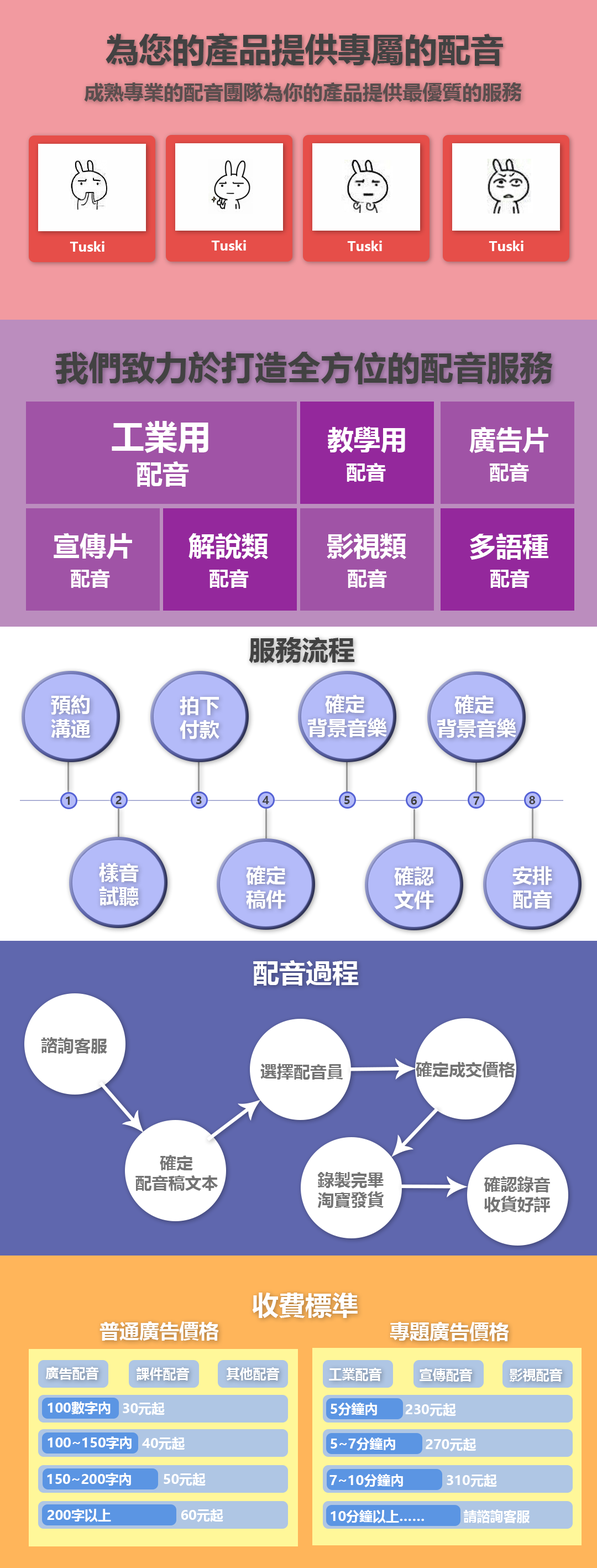
<style>
.page{position:relative;width:597px;height:1568px}
.page>*{position:absolute;margin:0}
.t1{font:33.2px "MicrosoftYaHei-Bold";color:#424242}
.t2{font:19.9px "MicrosoftYaHei-Bold";color:#424242}
.t3{font:13.3px "MicrosoftYaHei-Bold";color:#ffffff}
.t4{font:33.2px "MicrosoftYaHei-Bold";color:#ffffff}
.t5{font:26.5px "MicrosoftYaHei-Bold";color:#ffffff}
.t6{font:19.9px "MicrosoftYaHei-Bold";color:#ffffff}
.t7{font:26.5px "MicrosoftYaHei-Bold";color:#424242}
.t8{font:11.1px "MicrosoftYaHei-Bold";color:#424242}
.t9{font:16.6px "MicrosoftYaHei-Bold";color:#747474}
</style>
<div class="page">
<p class="t1" style="left:106px;top:33px;width:397px;height:33px">為您的產品提供專屬的配音</p>
<p class="t2" style="left:84px;top:82px;width:438px;height:20px">成熟專業的配音團隊為你的產品提供最優質的服務</p>
<p class="t3" style="left:70px;top:241px;width:35px;height:11px">Tuski</p>
<p class="t3" style="left:211px;top:240px;width:35px;height:11px">Tuski</p>
<p class="t3" style="left:347px;top:241px;width:35px;height:10px">Tuski</p>
<p class="t3" style="left:489px;top:241px;width:35px;height:10px">Tuski</p>
<p class="t1" style="left:55px;top:351px;width:498px;height:33px">我們致力於打造全方位的配音服務</p>
<p class="t4" style="left:112px;top:421px;width:97px;height:32px">工業用</p>
<p class="t5" style="left:328px;top:426px;width:77px;height:27px">教學用</p>
<p class="t5" style="left:470px;top:427px;width:79px;height:26px">廣告片</p>
<p class="t5" style="left:137px;top:461px;width:52px;height:26px">配音</p>
<p class="t6" style="left:346px;top:463px;width:40px;height:19px">配音</p>
<p class="t6" style="left:489px;top:463px;width:40px;height:19px">配音</p>
<p class="t5" style="left:54px;top:533px;width:78px;height:26px">宣傳片</p>
<p class="t5" style="left:189px;top:533px;width:79px;height:26px">解說類</p>
<p class="t5" style="left:327px;top:533px;width:80px;height:26px">影視類</p>
<p class="t5" style="left:470px;top:533px;width:79px;height:27px">多語種</p>
<p class="t6" style="left:70px;top:569px;width:40px;height:19px">配音</p>
<p class="t6" style="left:209px;top:569px;width:40px;height:19px">配音</p>
<p class="t6" style="left:347px;top:569px;width:40px;height:19px">配音</p>
<p class="t6" style="left:490px;top:569px;width:40px;height:19px">配音</p>
<p class="t7" style="left:249px;top:637px;width:106px;height:26px">服務流程</p>
<p class="t6" style="left:51px;top:695px;width:40px;height:43px">預約<br>溝通</p>
<p class="t6" style="left:180px;top:696px;width:40px;height:43px">拍下<br>付款</p>
<p class="t6" style="left:308px;top:694px;width:79px;height:43px">確定<br>背景音樂</p>
<p class="t6" style="left:437px;top:695px;width:80px;height:43px">確定<br>背景音樂</p>
<p class="t8" style="left:66px;top:796px;width:4px;height:9px">1</p>
<p class="t8" style="left:116px;top:796px;width:6px;height:8px">2</p>
<p class="t8" style="left:196px;top:796px;width:6px;height:8px">3</p>
<p class="t8" style="left:262px;top:796px;width:7px;height:8px">4</p>
<p class="t8" style="left:345px;top:796px;width:5px;height:8px">5</p>
<p class="t8" style="left:411px;top:796px;width:7px;height:9px">6</p>
<p class="t8" style="left:473px;top:796px;width:7px;height:9px">7</p>
<p class="t8" style="left:529px;top:796px;width:6px;height:8px">8</p>
<p class="t6" style="left:99px;top:863px;width:40px;height:43px">樣音<br>試聽</p>
<p class="t6" style="left:246px;top:866px;width:40px;height:43px">確定<br>稿件</p>
<p class="t6" style="left:394px;top:866px;width:40px;height:43px">確認<br>文件</p>
<p class="t6" style="left:513px;top:866px;width:40px;height:43px">安排<br>配音</p>
<p class="t5" style="left:253px;top:960px;width:106px;height:26px">配音過程</p>
<p class="t9" style="left:41px;top:1037px;width:66px;height:17px">諮詢客服</p>
<p class="t9" style="left:416px;top:1061px;width:99px;height:16px">確定成交價格</p>
<p class="t9" style="left:261px;top:1064px;width:82px;height:16px">選擇配音員</p>
<p class="t9" style="left:136px;top:1155px;width:82px;height:36px">確定<br>配音稿文本</p>
<p class="t9" style="left:317px;top:1172px;width:67px;height:36px">錄製完畢<br>淘寶發貨</p>
<p class="t9" style="left:484px;top:1176px;width:66px;height:36px">確認錄音<br>收貨好評</p>
<p class="t5" style="left:252px;top:1293px;width:106px;height:25px">收費標準</p>
<p class="t6" style="left:100px;top:1321px;width:119px;height:20px">普通廣告價格</p>
<p class="t6" style="left:390px;top:1322px;width:119px;height:19px">專題廣告價格</p>
<p class="t3" style="left:45px;top:1367px;width:54px;height:13px">廣告配音</p>
<p class="t3" style="left:136px;top:1367px;width:54px;height:14px">課件配音</p>
<p class="t3" style="left:227px;top:1367px;width:53px;height:14px">其他配音</p>
<p class="t3" style="left:329px;top:1368px;width:53px;height:13px">工業配音</p>
<p class="t3" style="left:420px;top:1368px;width:53px;height:14px">宣傳配音</p>
<p class="t3" style="left:509px;top:1368px;width:54px;height:14px">影視配音</p>
<p class="t3" style="left:48px;top:1402px;width:63px;height:12px">100數字內</p>
<p class="t3" style="left:123px;top:1402px;width:42px;height:13px">30元起</p>
<p class="t3" style="left:331px;top:1403px;width:46px;height:13px">5分鐘內</p>
<p class="t3" style="left:405px;top:1403px;width:51px;height:13px">230元起</p>
<p class="t3" style="left:48px;top:1436px;width:84px;height:13px">100~150字內</p>
<p class="t3" style="left:142px;top:1437px;width:43px;height:13px">40元起</p>
<p class="t3" style="left:331px;top:1437px;width:64px;height:14px">5~7分鐘內</p>
<p class="t3" style="left:426px;top:1438px;width:51px;height:13px">270元起</p>
<p class="t3" style="left:47px;top:1473px;width:84px;height:13px">150~200字內</p>
<p class="t3" style="left:164px;top:1473px;width:42px;height:13px">50元起</p>
<p class="t3" style="left:330px;top:1474px;width:73px;height:13px">7~10分鐘內</p>
<p class="t3" style="left:447px;top:1474px;width:50px;height:13px">310元起</p>
<p class="t3" style="left:47px;top:1509px;width:64px;height:13px">200字以上</p>
<p class="t3" style="left:181px;top:1509px;width:42px;height:13px">60元起</p>
<p class="t3" style="left:331px;top:1510px;width:93px;height:13px">10分鐘以上……</p>
<p class="t3" style="left:463px;top:1509px;width:67px;height:14px">請諮詢客服</p>
</div>
